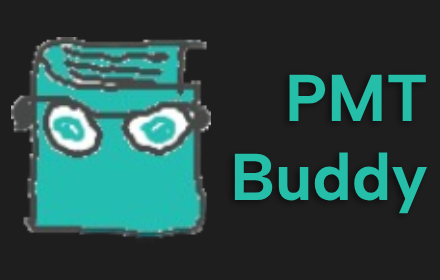
<style>
.page{position:relative;width:440px;height:280px;background:#1f1e1f}
.page>*{position:absolute;margin:0}
.t1{font:66px "AlbertSans-Bold";color:#25bea9}
</style>
<div class="page">
<p class="t1" style="left:234px;top:74px;width:194px;height:140px;text-align:right">PMT<br>Buddy</p>
</div>
